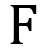
<style>
.page{position:relative;width:50px;height:50px;background:#ffffff}
.page>*{position:absolute;margin:0}
.t1{font:58.3px "CambriaMath";color:#000000}
</style>
<div class="page">
<p class="t1" style="left:10px;top:5px;width:27px;height:39px">F</p>
</div>
